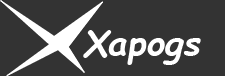
<style>
.page{position:relative;width:225px;height:76px;background:#333333}
.page>*{position:absolute;margin:0}
.t1{font:35px "ComicSansMS-BoldItalic";color:#ffffff}
</style>
<div class="page">
<p class="t1" style="left:83px;top:30px;width:118px;height:35px">Xapogs</p>
</div>
